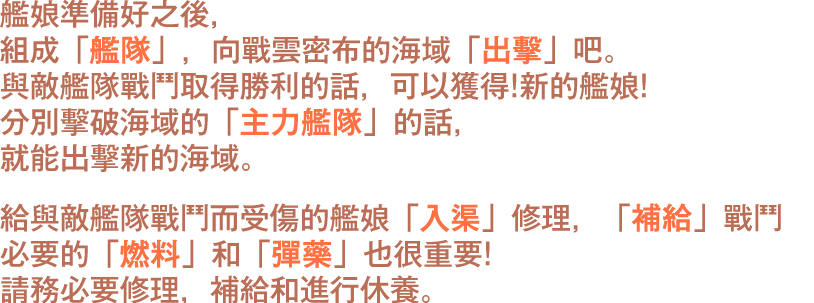
<style>
.page{position:relative;width:814px;height:303px;background:#ffffff}
.page>*{position:absolute;margin:0}
.t1{font:30px/36px "GothicMB101Pr6N-Medium";color:#bb6d56}
.t2{font:30px/36px "GothicMB101Pr6N-Medium";color:#ff7043;font-weight:bold}
.t3{font:30px/30px "GothicMB101Pr6N-Medium";color:#bb6d56}
</style>
<div class="page">
<p class="t1" style="left:0px;top:0px;width:782px;height:305px">艦娘準備好之後，<br>組成「<span class="t2">艦隊</span>」，向戰雲密布的海域「<span class="t2">出擊</span>」吧。<br>與敵艦隊戰鬥取得勝利的話，可以獲得!新的艦娘!<br>分別擊破海域的「<span class="t2">主力艦隊</span>」的話，<br><span class="t3">就能出擊新的海域。<br><br></span>給與敵艦隊戰鬥而受傷的艦娘「<span class="t2">入渠</span>」修理，「<span class="t2">補給</span>」戰鬥<br>必要的「<span class="t2">燃料</span>」和「<span class="t2">彈藥</span>」也很重要!<br>請務必要修理，補給和進行休養。</p>
</div>
